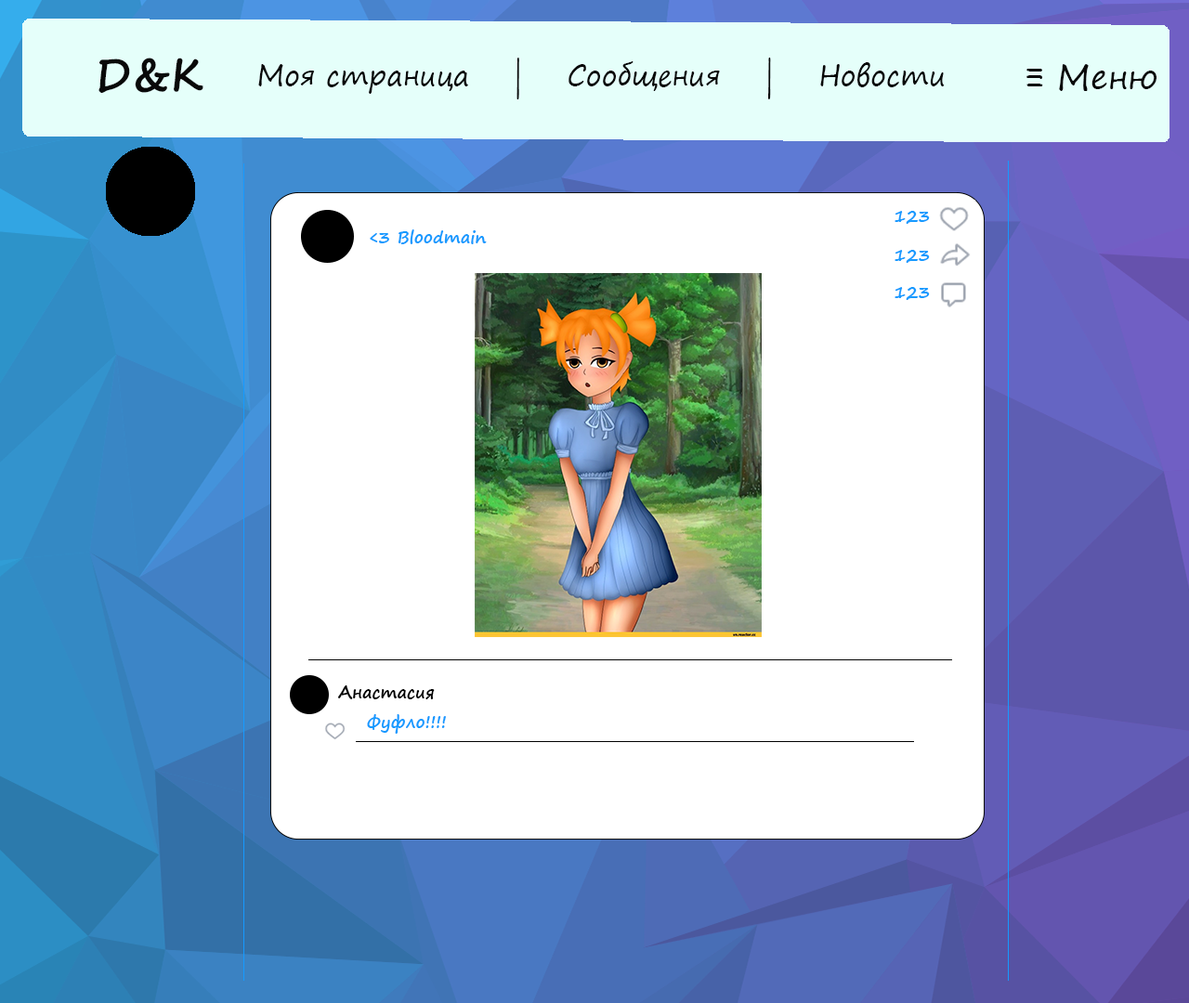
<style>
.page{position:relative;width:1189px;height:1003px;background:#ffffff}
.page>*{position:absolute;margin:0}
.t1{font:44.6px "SegoePrint-Bold";color:#090909}
.t2{font:27.9px "SegoePrint";color:#090909}
.t3{font:33.4px "SegoePrint";color:#090909}
.t4{font:16.7px "SegoePrint-Bold";color:#169aff}
.t5{font:16.7px "SegoePrint-Bold";color:#000000}
</style>
<div class="page">
<p class="t1" style="left:98px;top:58px;width:105px;height:35px;rotate:-1deg">D&amp;K</p>
<p class="t2" style="left:258px;top:58px;width:687px;height:41px">Моя страница    |    Сообщения    |    Новости</p>
<p class="t3" style="left:1026px;top:64px;width:130px;height:27px">≡ Меню</p>
<p class="t4" style="left:894px;top:211px;width:36px;height:13px">123</p>
<p class="t4" style="left:370px;top:229px;width:117px;height:15px">&lt;3 Bloodmain</p>
<p class="t4" style="left:894px;top:250px;width:36px;height:13px">123</p>
<p class="t4" style="left:894px;top:287px;width:36px;height:13px">123</p>
<p class="t5" style="left:337px;top:685px;width:98px;height:14px">Анастасия</p>
<p class="t4" style="left:367px;top:714px;width:79px;height:20px">Фуфло!!!!</p>
</div>
